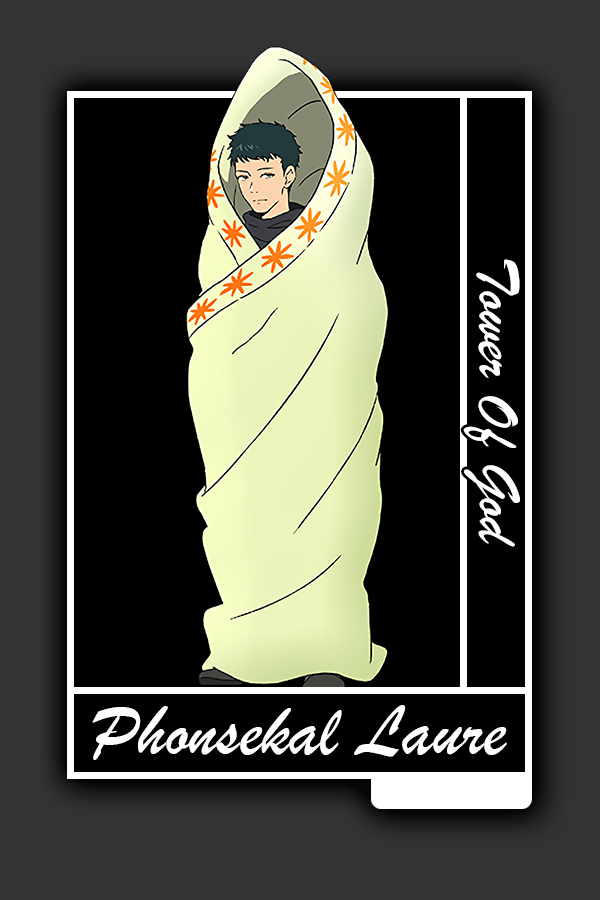
<style>
.page{position:relative;width:600px;height:900px;background:#000000}
.page>*{position:absolute;margin:0}
.t1{font:61.5px "BrushScriptMT";color:#ffffff}
.t2{font:75px "BrushScriptMT";color:#ffffff}
</style>
<div class="page">
<p class="t1" style="left:463px;top:259px;width:57px;height:288px;rotate:90deg">Tower Of God</p>
<p class="t2" style="left:92px;top:705px;width:415px;height:55px">Phonsekal Laure</p>
</div>
